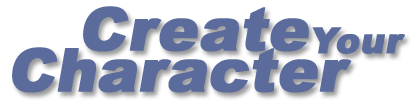
<style>
.page{position:relative;width:414px;height:108px;background:#ffffff}
.page>*{position:absolute;margin:0}
.t1{font:60px "Arial-Black";color:#5a6b9c;font-weight:bold;font-style:italic}
.t2{font:36px "Arial-Black";color:#5a6b9c;font-weight:bold;font-style:italic}
.t3{font:60px "Arial-Black";letter-spacing:-0.01em;color:#5a6b9c;font-weight:bold;font-style:italic}
</style>
<div class="page">
<p class="t1" style="left:83px;top:6px;width:226px;height:46px">Create</p>
<p class="t2" style="left:312px;top:27px;width:93px;height:27px">Your</p>
<p class="t3" style="left:12px;top:47px;width:340px;height:46px">Character</p>
</div>
